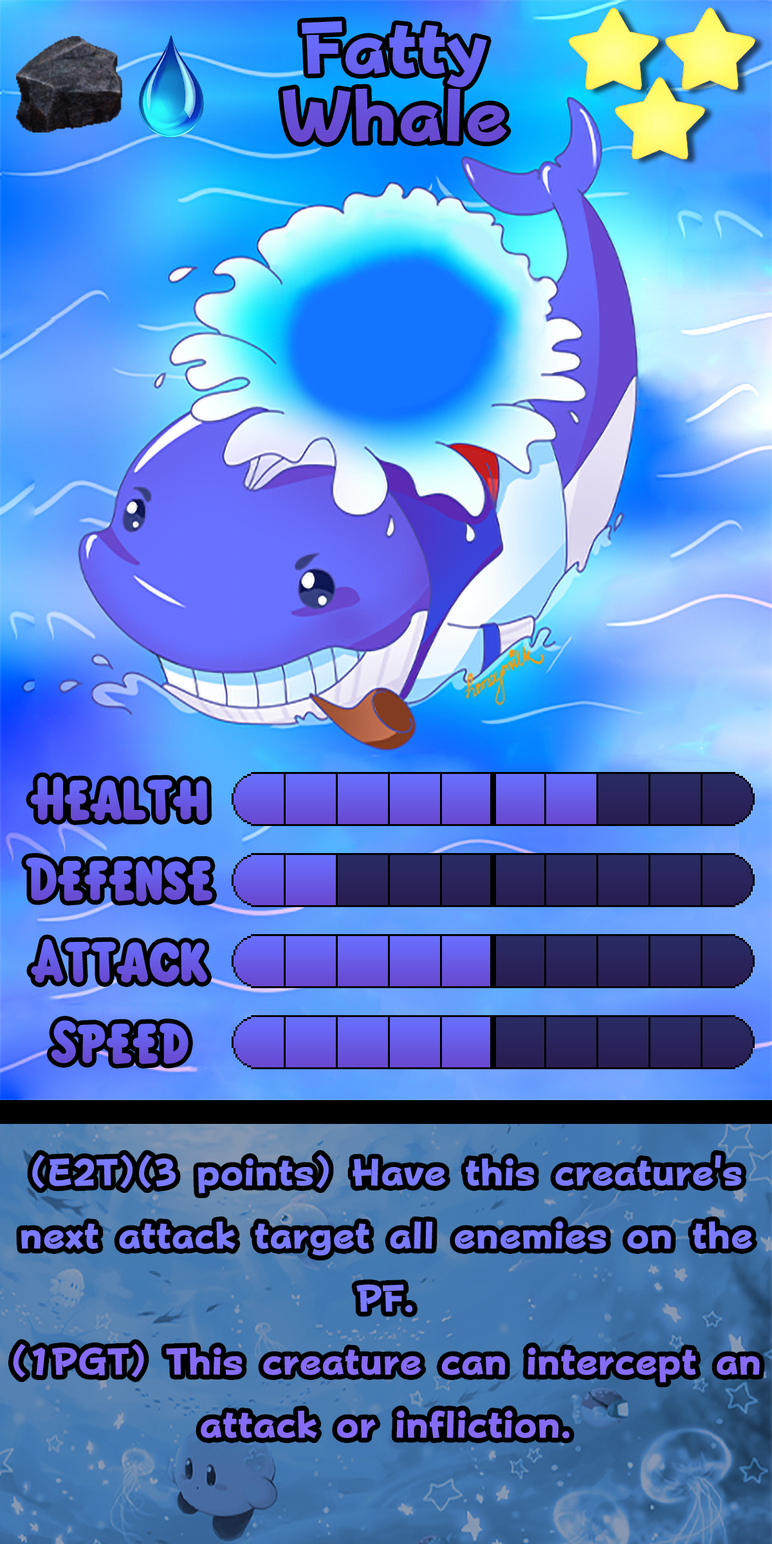
<style>
.page{position:relative;width:772px;height:1544px}
.page>*{position:absolute;margin:0}
.t1{font:125.5px/67.6px "FOTPopHappinessStrp-ExtraBold";color:#6854de}
.t2{font:92.7px "KirbyClassic";color:#685ae5}
.t3{font:92.7px "KirbyClassic";color:#685ce7}
.t4{font:64.3px/63.1px "FOTPopHappinessStrp-ExtraBold";color:#866cf5}
.t5{font:64.3px/63.1px "FOTPopHappinessStrp-ExtraBold";color:#7a7bff}
.t6{font:85.5px/55.6px "FOTPopHappinessStrp-ExtraBold";color:#7a7bff}
</style>
<div class="page">
<p class="t1" style="left:282px;top:21px;width:225px;height:122px;text-align:center">Fatty<br>Whale</p>
<p class="t2" style="left:30px;top:777px;width:178px;height:44px">Health</p>
<p class="t3" style="left:26px;top:858px;width:186px;height:44px">Defense</p>
<p class="t2" style="left:31px;top:939px;width:176px;height:44px">Attack</p>
<p class="t3" style="left:51px;top:1021px;width:138px;height:43px">Speed</p>
<p class="t4" style="left:13px;top:1155px;width:747px;height:284px;text-align:center"><span class="t5">(E2T)(3 points) Have this creature</span><span class="t6">'</span><span class="t5">s next attack target all enemies on the PF.<br></span>(1PGT) This creature can intercept an attack or infliction.</p>
</div>
